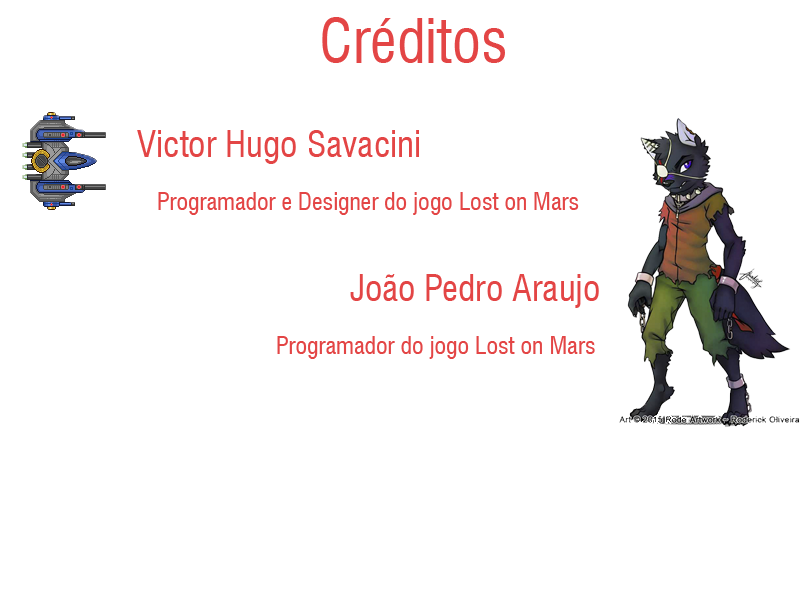
<style>
.page{position:relative;width:800px;height:600px;background:#ffffff}
.page>*{position:absolute;margin:0}
.t1{font:60px "Swiss721BT-RomanCondensed";color:#e34545}
.t2{font:36px "Swiss721BT-RomanCondensed";color:#e34545}
.t3{font:24px "Swiss721BT-RomanCondensed";color:#e34545}
</style>
<div class="page">
<p class="t1" style="left:322px;top:17px;width:183px;height:46px">Créditos</p>
<p class="t2" style="left:137px;top:130px;width:282px;height:34px">Victor Hugo Savacini</p>
<p class="t3" style="left:158px;top:192px;width:421px;height:23px">Programador e Designer do jogo Lost on Mars</p>
<p class="t2" style="left:350px;top:274px;width:249px;height:34px">João Pedro Araujo</p>
<p class="t3" style="left:277px;top:336px;width:318px;height:23px">Programador do jogo Lost on Mars</p>
</div>
